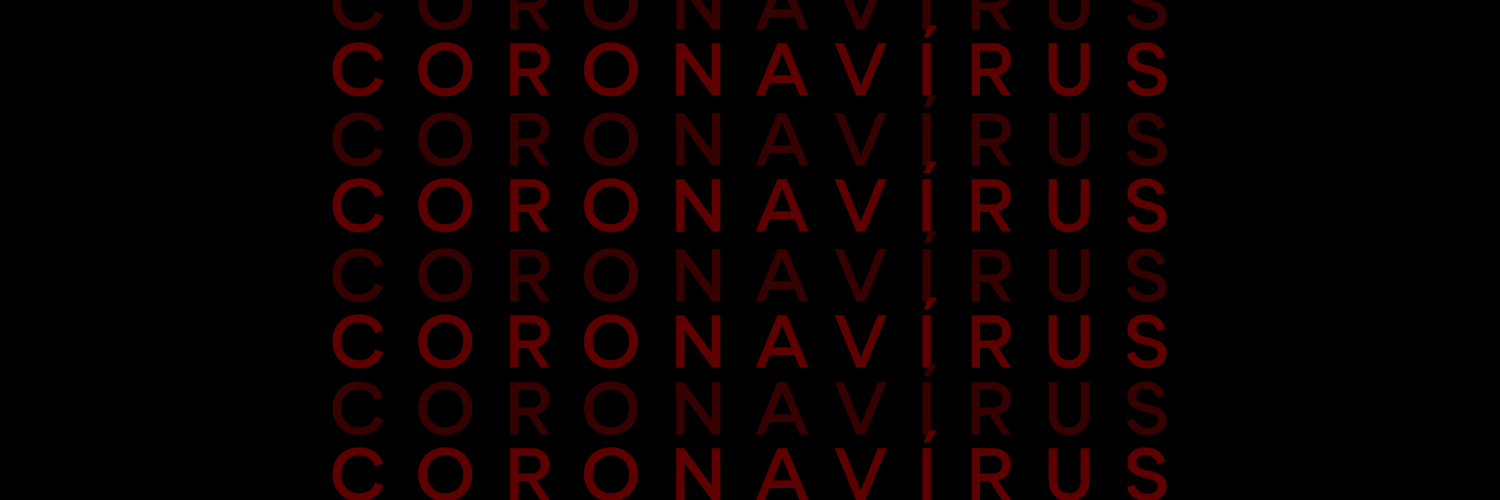
<style>
.page{position:relative;width:1500px;height:500px;background:#000000}
.page>*{position:absolute;margin:0}
.t1{font:74.7px "Gramatika-Medium";letter-spacing:0.385em;color:#5f0000}
.t2{font:74.7px "Gramatika-Medium";letter-spacing:0.385em;color:#350101}
</style>
<div class="page">
<p class="t1" style="left:332px;top:25px;width:835px;height:72px">CORONAVÍRUS</p>
<p class="t2" style="left:332px;top:95px;width:835px;height:72px">CORONAVÍRUS</p>
<p class="t1" style="left:332px;top:161px;width:835px;height:72px">CORONAVÍRUS</p>
<p class="t2" style="left:332px;top:231px;width:835px;height:72px">CORONAVÍRUS</p>
<p class="t1" style="left:332px;top:297px;width:835px;height:72px">CORONAVÍRUS</p>
<p class="t2" style="left:332px;top:364px;width:835px;height:72px">CORONAVÍRUS</p>
<p class="t1" style="left:332px;top:430px;width:835px;height:72px">CORONAVÍRUS</p>
</div>
